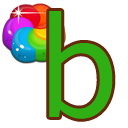
<style>
.page{position:relative;width:128px;height:128px;background:#ffffff}
.page>*{position:absolute;margin:0}
.t1{font:132.9px "SourceHanSansCN-Regular";color:#30af14}
</style>
<div class="page">
<p class="t1" style="left:49px;top:11px;width:64px;height:108px">b</p>
</div>
